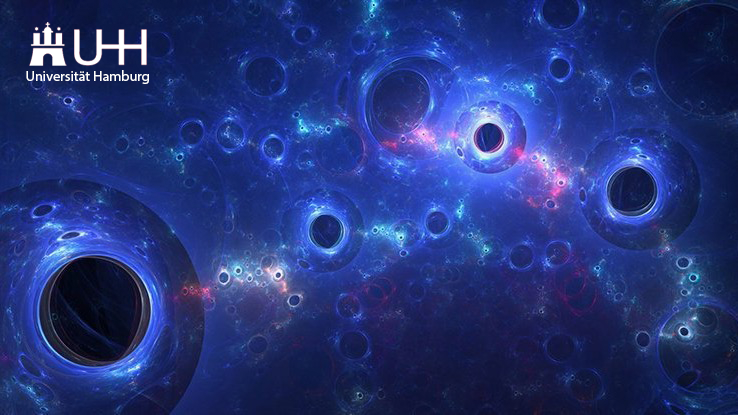
<style>
.page{position:relative;width:738px;height:415px}
.page>*{position:absolute;margin:0}
.t1{font:14.3px "MyriadPro-Regular";color:#ffffff}
</style>
<div class="page">
<p class="t1" style="left:26px;top:70px;width:123px;height:14px">Universität Hamburg</p>
</div>
